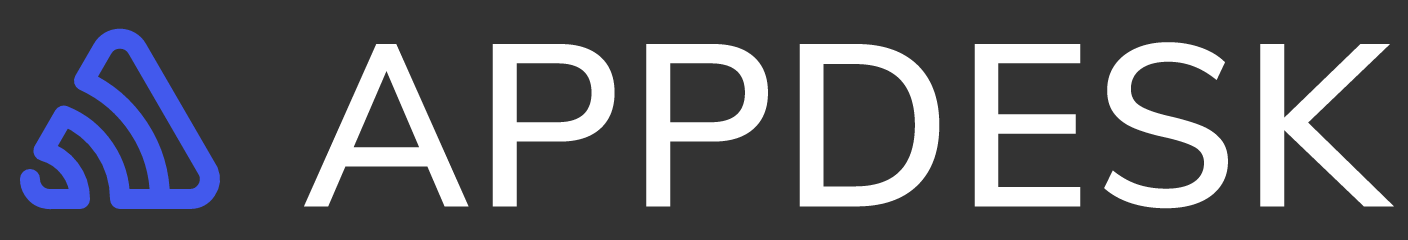
<style>
.page{position:relative;width:1408px;height:240px;background:#333333}
.page>*{position:absolute;margin:0}
.t1{font:230px "NunitoSans-SemiBold";letter-spacing:0.015em;color:#ffffff}
</style>
<div class="page">
<p class="t1" style="left:304px;top:42px;width:1090px;height:167px">APPDESK</p>
</div>
